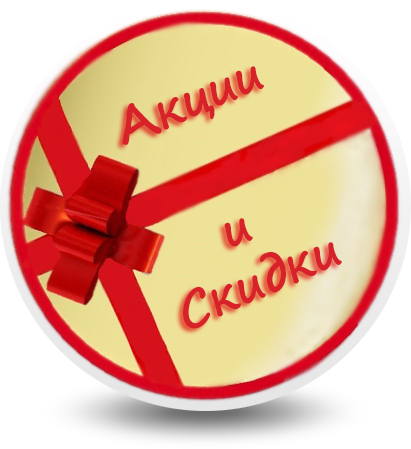
<style>
.page{position:relative;width:411px;height:449px;background:#ffffff}
.page>*{position:absolute;margin:0}
.t1{font:48px "SegoePrint-Bold";color:#d72229}
</style>
<div class="page">
<p class="t1" style="left:122px;top:66px;width:142px;height:79px;rotate:-23deg">Акции</p>
<p class="t1" style="left:183px;top:218px;width:159px;height:111px;text-align:center;rotate:-24deg">и<br>Скидки</p>
</div>
